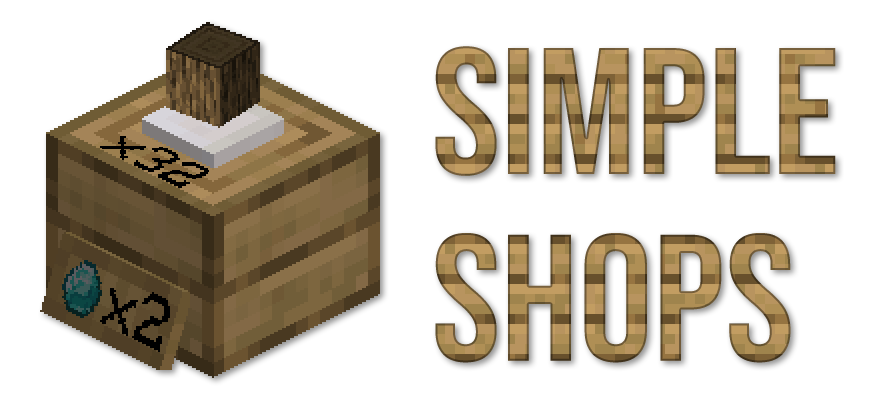
<style>
.page{position:relative;width:876px;height:400px;background:#ffffff}
.page>*{position:absolute;margin:0}
.t1{font:179.6px/186.6px "BebasNeue-Regular";scale:1.03 1}
</style>
<div class="page">
<p class="t1" style="left:435px;top:46px;width:401px;height:317px;text-align:right">Simple<br>Shops</p>
</div>
